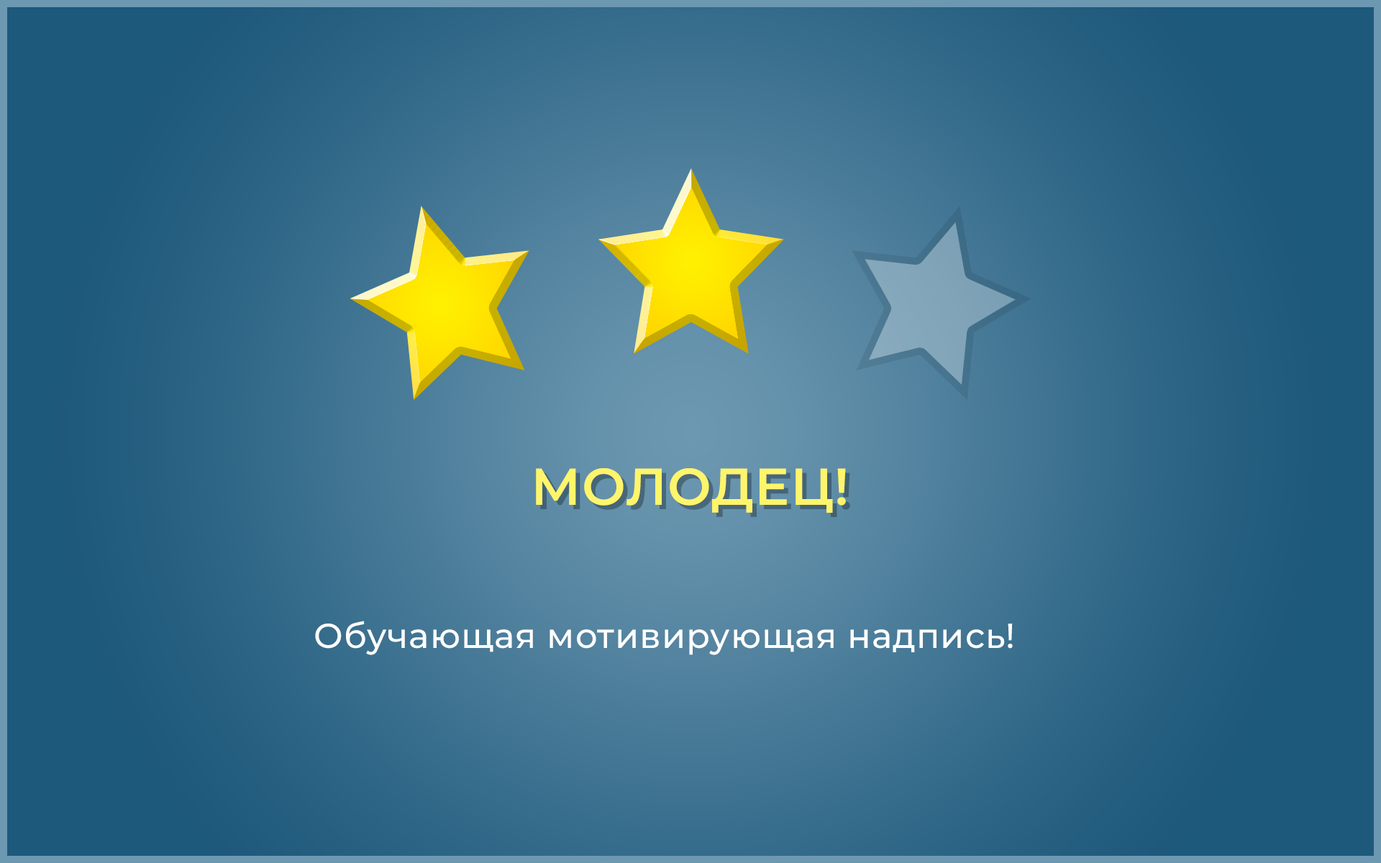
<style>
.page{position:relative;width:1381px;height:863px}
.page>*{position:absolute;margin:0}
.t1{font:51.8px "Montserrat-SemiBold";letter-spacing:0.02em;color:#fff56c;text-transform:uppercase}
.t2{font:34.5px "Montserrat-Medium";letter-spacing:0.02em;color:#ffffff}
</style>
<div class="page">
<p class="t1" style="left:536px;top:468px;width:310px;height:45px">МОЛОДЕЦ!</p>
<p class="t2" style="left:315px;top:621px;width:698px;height:34px">Обучающая мотивирующая надпись!</p>
</div>
